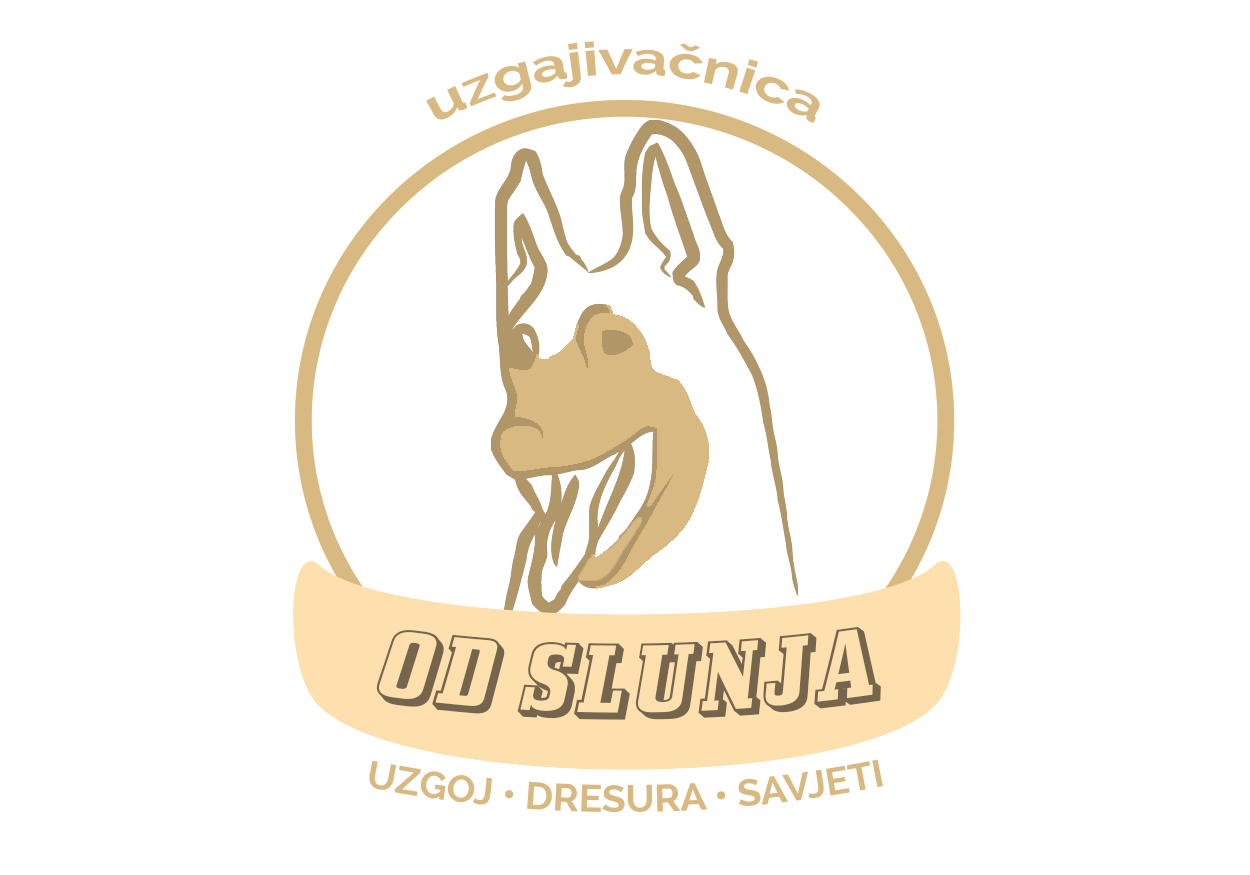
<style>
.page{position:relative;width:1250px;height:875px;background:#ffffff}
.page>*{position:absolute;margin:0}
.t1{font:45.8px "Raleway-Bold";color:#d9b982}
.t2{font:83.3px "Bullpen3D";color:#75654d}
.t3{font:37.5px "Raleway-Bold";color:#d9b982}
</style>
<div class="page">
<p class="t1" style="left:426px;top:41px;width:394px;height:82px;text-align:center">uzgajivačnica</p>
<p class="t2" style="left:376px;top:626px;width:505px;height:94px">OD SLUNJA</p>
<p class="t3" style="left:369px;top:759px;width:514px;height:54px">UZGOJ • DRESURA • SAVJETI</p>
</div>
